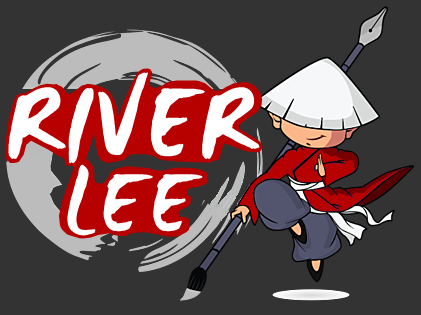
<style>
.page{position:relative;width:421px;height:315px;background:#333333}
.page>*{position:absolute;margin:0}
.t1{font:121.1px "WCManoNegraBta";color:#ffffff;font-weight:bold;scale:0.87 1}
.t2{font:101.9px "WCManoNegraBta";color:#ffffff}
</style>
<div class="page">
<p class="t1" style="left:8px;top:72px;width:252px;height:92px">RIVER</p>
<p class="t2" style="left:67px;top:164px;width:136px;height:72px">LEE</p>
</div>
